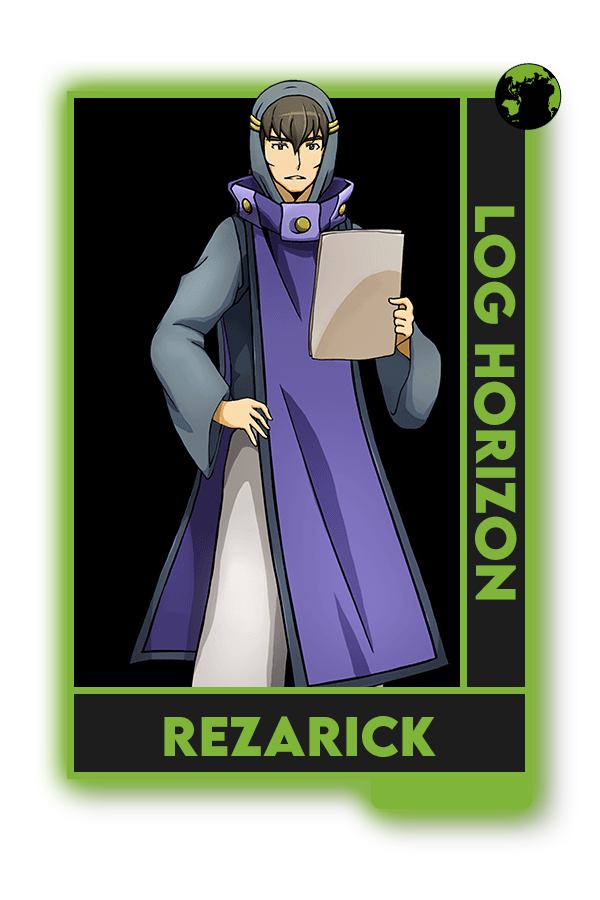
<style>
.page{position:relative;width:600px;height:900px;background:#ffffff}
.page>*{position:absolute;margin:0}
.t1{font:50px "LEMONMILK-Bold";color:#7fad41}
</style>
<div class="page">
<p class="t1" style="left:474px;top:206px;width:43px;height:394px;rotate:90deg">Log Horizon</p>
<p class="t1" style="left:164px;top:716px;width:272px;height:41px">Rezarick</p>
</div>
